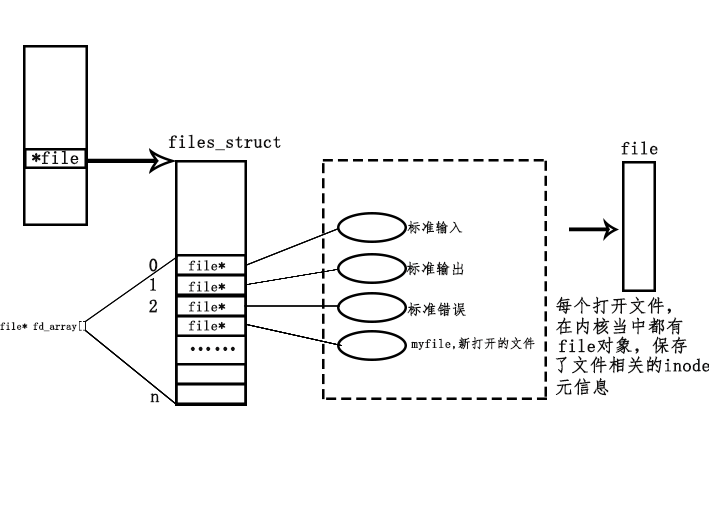
<style>
.page{position:relative;width:709px;height:510px;background:#ffffff}
.page>*{position:absolute;margin:0}
.t1{font:18px "FangSong";color:#111010;font-weight:bold}
.t2{font:18.2px "FangSong";color:#111010;font-weight:bold}
.t3{font:13.6px "FangSong";color:#111010;font-weight:bold}
.t4{font:14.1px "FangSong";color:#111010;font-weight:bold}
.t5{font:14.5px "FangSong";color:#111010;font-weight:bold}
.t6{font:14.6px "FangSong";color:#111010;font-weight:bold}
.t7{font:10.5px "FangSong";color:#111010;font-weight:bold}
.t8{font:12.6px "FangSong";color:#111010;font-weight:bold}
.t9{font:24px "FangSong";color:#111010;font-weight:bold}
</style>
<div class="page">
<p class="t1" style="left:168px;top:134px;width:113px;height:17px">files_struct</p>
<p class="t2" style="left:32px;top:150px;width:47px;height:15px">*file</p>
<p class="t1" style="left:621px;top:141px;width:37px;height:14px">file</p>
<p class="t3" style="left:407px;top:220px;width:56px;height:14px">标准输入</p>
<p class="t1" style="left:149px;top:258px;width:9px;height:14px">0</p>
<p class="t4" style="left:188px;top:260px;width:38px;height:11px">file*</p>
<p class="t5" style="left:406px;top:261px;width:58px;height:15px">标准输出</p>
<p class="t1" style="left:150px;top:278px;width:6px;height:13px">1</p>
<p class="t4" style="left:188px;top:281px;width:38px;height:11px">file*</p>
<p class="t1" style="left:149px;top:299px;width:8px;height:14px">2</p>
<p class="t4" style="left:188px;top:301px;width:38px;height:11px">file*</p>
<p class="t6" style="left:407px;top:302px;width:59px;height:15px">标准错误</p>
<p class="t1" style="left:556px;top:296px;width:115px;height:19px">每个打开文件，</p>
<p class="t1" style="left:556px;top:317px;width:127px;height:18px">在内核当中都有</p>
<p class="t7" style="left:0px;top:321px;width:86px;height:11px">file* fd_array[]</p>
<p class="t4" style="left:188px;top:320px;width:38px;height:11px">file*</p>
<p class="t8" style="left:411px;top:337px;width:124px;height:13px">myfile,新打开的文件</p>
<p class="t1" style="left:558px;top:336px;width:129px;height:18px">file对象，保存</p>
<p class="t9" style="left:190px;top:346px;width:45px;height:5px">……</p>
<p class="t1" style="left:555px;top:356px;width:155px;height:18px">了文件相关的inode</p>
<p class="t1" style="left:555px;top:378px;width:54px;height:18px">元信息</p>
<p class="t1" style="left:150px;top:393px;width:10px;height:10px">n</p>
</div>
